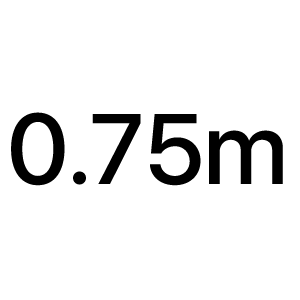
<style>
.page{position:relative;width:300px;height:300px;background:#ffffff}
.page>*{position:absolute;margin:0}
.t1{font:99px "SFUIDisplay-Medium";color:#000000}
</style>
<div class="page">
<p class="t1" style="left:11px;top:112px;width:272px;height:74px">0.75m</p>
</div>
